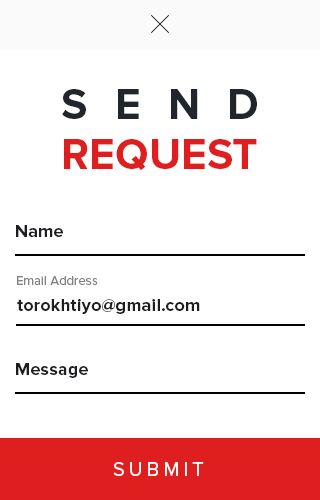
<style>
.page{position:relative;width:320px;height:500px;background:#ffffff}
.page>*{position:absolute;margin:0}
.t1{font:44px/50px "ProximaNova-Bold";color:#df1f1f}
.t2{font:44px/50px "ProximaNova-Bold";letter-spacing:0.62em;color:#21262c}
.t3{font:18px "ProximaNova-Bold";letter-spacing:0.005em;color:#1d1d22}
.t4{font:13px "ProximaNova-Regular";letter-spacing:0.005em;color:#838383}
.t5{font:20px "ProximaNova-Regular";letter-spacing:0.2em;color:#ffffff}
</style>
<div class="page">
<p class="t1" style="left:62px;top:89px;width:195px;height:82px"><span class="t2">SEND<br></span>REQUEST</p>
<p class="t3" style="left:16px;top:225px;width:47px;height:12px">Name</p>
<p class="t4" style="left:17px;top:276px;width:81px;height:9px">Email Address</p>
<p class="t3" style="left:17px;top:299px;width:183px;height:15px">torokhtiyo@gmail.com</p>
<p class="t3" style="left:16px;top:363px;width:72px;height:15px">Message</p>
<p class="t5" style="left:113px;top:462px;width:91px;height:14px">SUBMIT</p>
</div>
